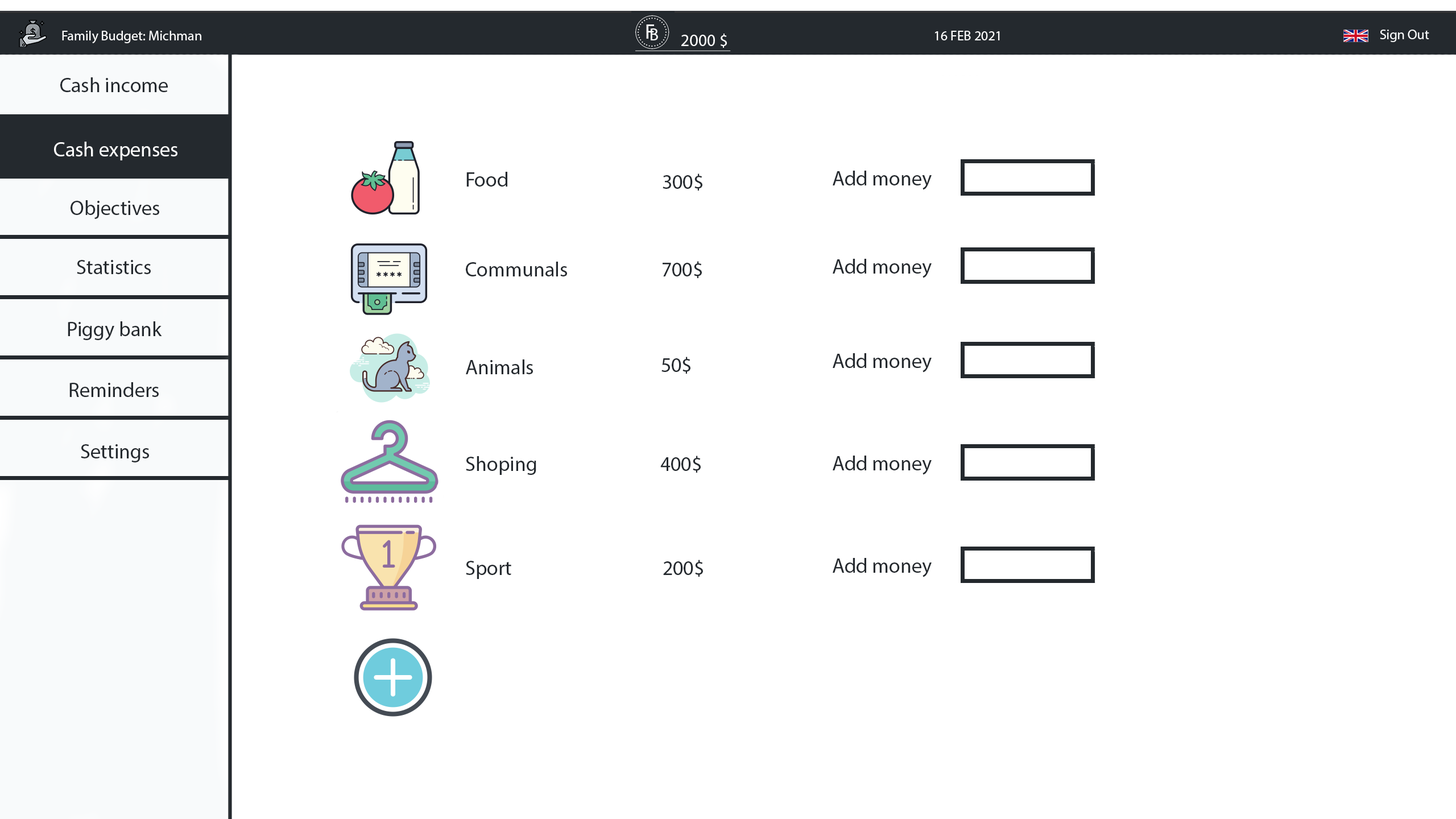
<style>
.page{position:relative;width:1456px;height:819px;background:#ffffff}
.page>*{position:absolute;margin:0}
.t1{font:13.6px "MyriadPro-Regular";color:#f8fafb}
.t2{font:13.6px "MyriadPro-Regular";color:#ffffff}
.t3{font:17.1px "MyriadPro-Regular";color:#ffffff}
.t4{font:20.5px "MyriadPro-Regular";color:#24292e}
.t5{font:20.5px "MyriadPro-Regular";color:#ffffff}
</style>
<div class="page">
<p class="t1" style="left:1380px;top:30px;width:49px;height:12px">Sign Out</p>
<p class="t2" style="left:62px;top:31px;width:139px;height:12px">Family Budget: Michman</p>
<p class="t3" style="left:681px;top:34px;width:46px;height:14px">2000 $</p>
<p class="t2" style="left:935px;top:31px;width:65px;height:9px">16 FEB 2021</p>
<p class="t4" style="left:60px;top:77px;width:108px;height:15px">Cash income</p>
<p class="t5" style="left:54px;top:142px;width:123px;height:18px">Cash expenses</p>
<p class="t4" style="left:466px;top:172px;width:41px;height:15px">Food</p>
<p class="t4" style="left:663px;top:173px;width:39px;height:18px">300$</p>
<p class="t4" style="left:71px;top:200px;width:88px;height:19px">Objectives</p>
<p class="t4" style="left:77px;top:260px;width:74px;height:14px">Statistics</p>
<p class="t4" style="left:466px;top:262px;width:101px;height:14px">Communals</p>
<p class="t4" style="left:663px;top:261px;width:39px;height:17px">700$</p>
<p class="t4" style="left:68px;top:321px;width:94px;height:20px">Piggy bank</p>
<p class="t4" style="left:466px;top:359px;width:67px;height:15px">Animals</p>
<p class="t4" style="left:661px;top:357px;width:29px;height:17px">50$</p>
<p class="t4" style="left:69px;top:382px;width:90px;height:15px">Reminders</p>
<p class="t4" style="left:81px;top:444px;width:68px;height:18px">Settings</p>
<p class="t4" style="left:466px;top:456px;width:70px;height:19px">Shoping</p>
<p class="t4" style="left:660px;top:456px;width:41px;height:17px">400$</p>
<p class="t4" style="left:466px;top:561px;width:45px;height:18px">Sport</p>
<p class="t4" style="left:663px;top:560px;width:40px;height:17px">200$</p>
</div>
